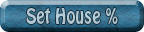
<style>
.page{position:relative;width:144px;height:32px}
.page>*{position:absolute;margin:0}
.t1{font:19.2px "HoboStd";color:#b2c9d5;scale:0.83 1}
</style>
<div class="page">
<p class="t1" style="left:26px;top:8px;width:92px;height:16px">Set House %</p>
</div>
